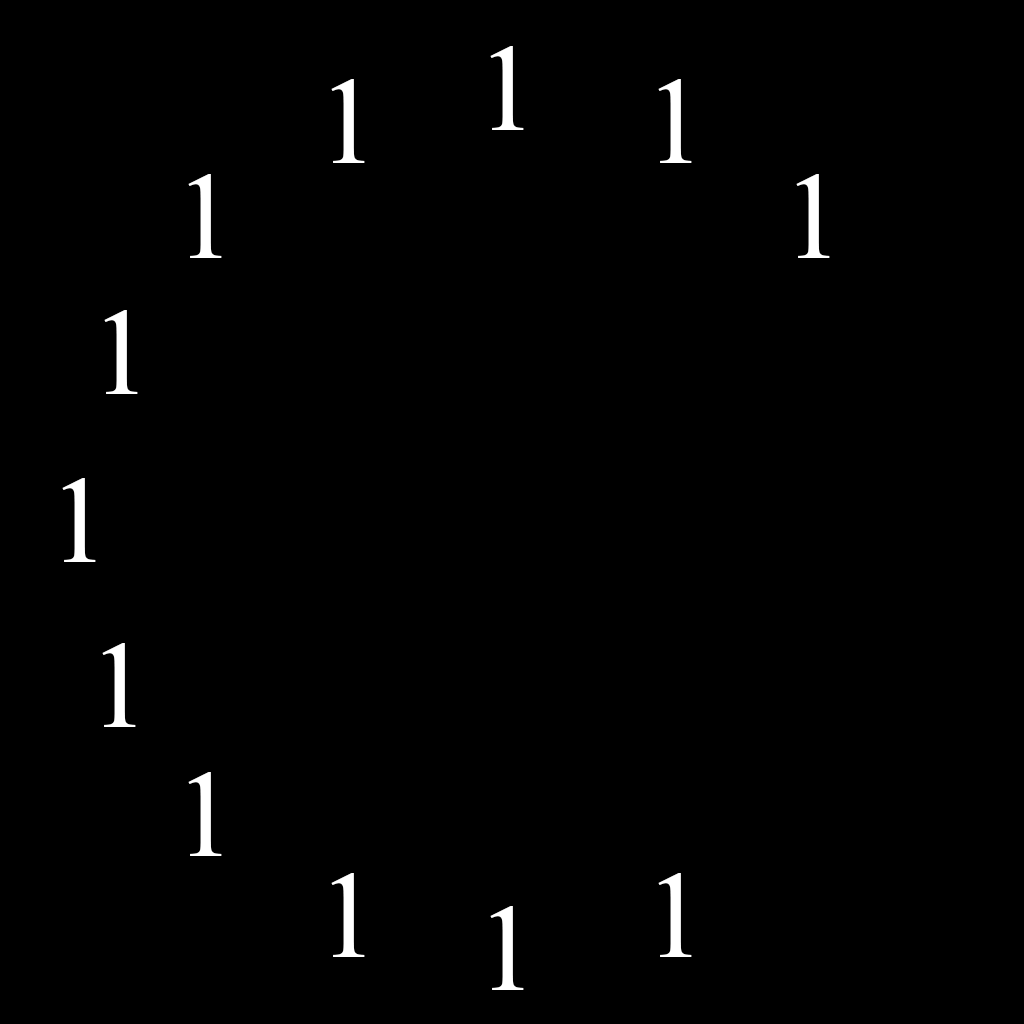
<style>
.page{position:relative;width:1024px;height:1024px;background:#000000}
.page>*{position:absolute;margin:0}
.t1{font:124.6px "TimesNewRomanPSMT";color:#ffffff}
</style>
<div class="page">
<p class="t1" style="left:490px;top:46px;width:34px;height:84px">1</p>
<p class="t1" style="left:331px;top:79px;width:34px;height:84px">1</p>
<p class="t1" style="left:658px;top:79px;width:34px;height:84px">1</p>
<p class="t1" style="left:188px;top:174px;width:34px;height:84px">1</p>
<p class="t1" style="left:796px;top:174px;width:34px;height:84px">1</p>
<p class="t1" style="left:104px;top:310px;width:34px;height:84px">1</p>
<p class="t1" style="left:62px;top:478px;width:34px;height:84px">1</p>
<p class="t1" style="left:102px;top:643px;width:34px;height:84px">1</p>
<p class="t1" style="left:188px;top:772px;width:34px;height:84px">1</p>
<p class="t1" style="left:331px;top:873px;width:34px;height:84px">1</p>
<p class="t1" style="left:658px;top:873px;width:34px;height:84px">1</p>
<p class="t1" style="left:490px;top:906px;width:34px;height:84px">1</p>
</div>
